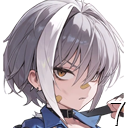
<style>
.page{position:relative;width:127px;height:128px;background:#ffffff}
.page>*{position:absolute;margin:0}
.t1{font:50px "THSarabunNew";color:#ffffff}
</style>
<div class="page">
<p class="t1" style="left:109px;top:101px;width:16px;height:24px">7</p>
</div>
